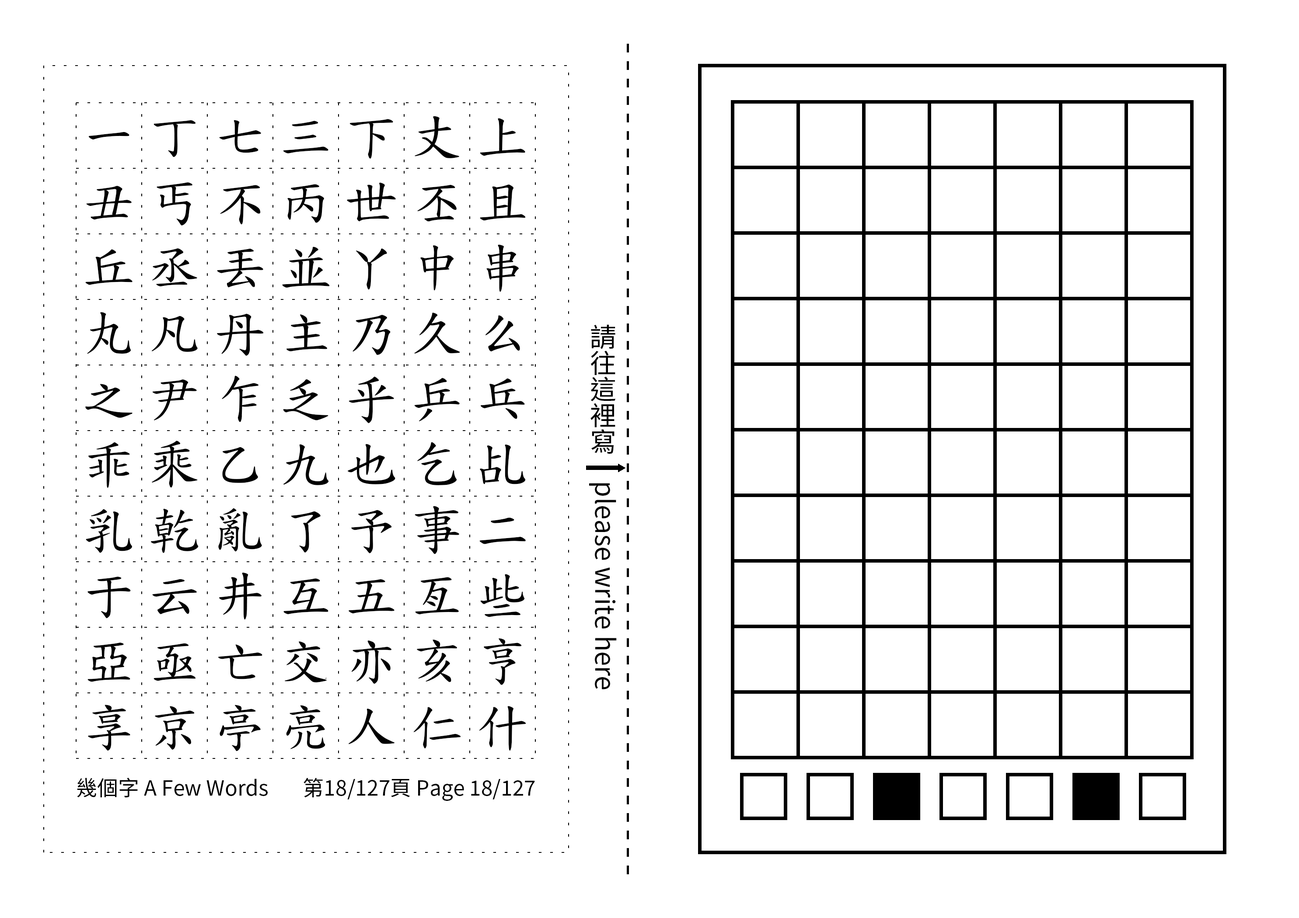
<style>
.page{position:relative;width:1299px;height:918px;background:#ffffff}
.page>*{position:absolute;margin:0}
.t1{font:52.5px/65.6px "TW-Kai-98_1";letter-spacing:0.25em;color:#000000}
.t2{font:26.2px "SourceHanSansTC-Regular";color:#000000}
.t3{font:21px "SourceHanSansTC-Regular";color:#000000}
</style>
<div class="page">
<p class="t1" style="left:85px;top:116px;width:441px;height:636px;text-align:center">一丁七三下丈上丑丐不丙世丕且丘丞丟並丫中串丸凡丹主乃久么之尹乍乏乎乒乓乖乘乙九也乞乩乳乾亂了予事二于云井互五亙些亞亟亡交亦亥亨享京亭亮人仁什</p>
<p class="t2" style="left:589px;top:324px;width:28px;height:366px;text-align:center">請往這裡寫　please write here</p>
<p class="t3" style="left:77px;top:778px;width:191px;height:20px">幾個字 A Few Words</p>
<p class="t3" style="left:303px;top:778px;width:232px;height:23px">第18/127頁 Page 18/127</p>
</div>
